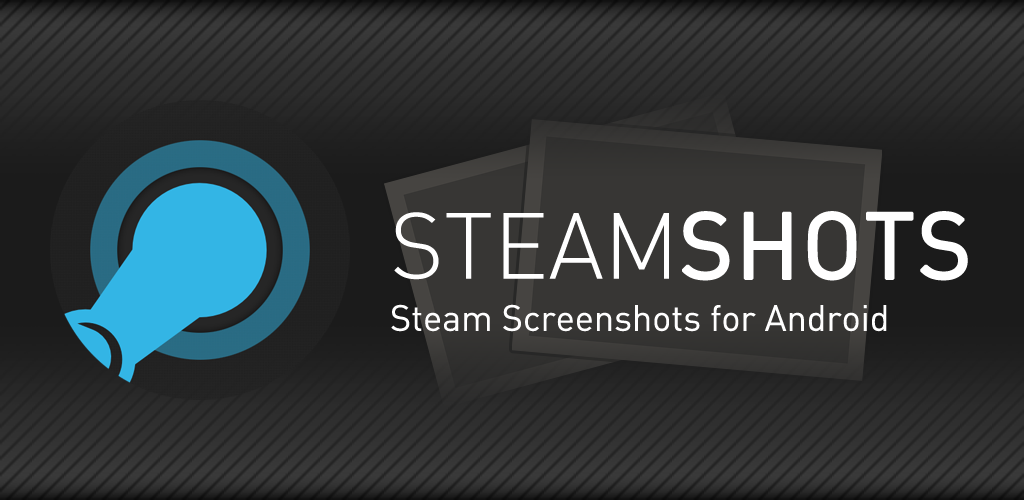
<style>
.page{position:relative;width:1024px;height:500px}
.page>*{position:absolute;margin:0}
.t1{font:92px "DIN-Light";color:#ffffff}
.t2{font:92px "DIN-Regular";color:#ffffff;font-weight:bold}
.t3{font:36px "DIN-Regular";color:#ffffff}
</style>
<div class="page">
<p class="t1" style="left:394px;top:211px;width:574px;height:70px">STEAM<span class="t2">SHOTS</span></p>
<p class="t3" style="left:391px;top:304px;width:496px;height:28px">Steam Screenshots for Android</p>
</div>
